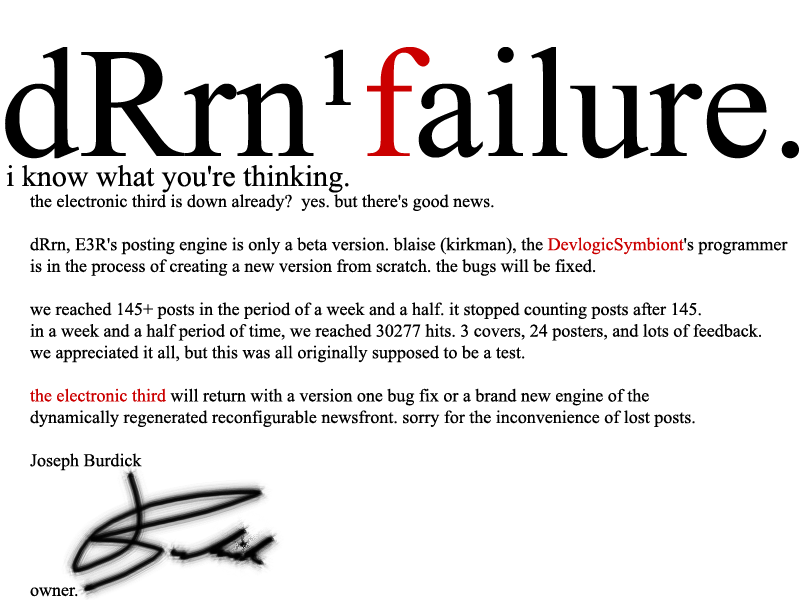
<style>
.page{position:relative;width:800px;height:600px;background:#ffffff}
.page>*{position:absolute;margin:0}
.t1{font:157px "TimesNewRomanPSMT";color:#000000}
.t2{font:157px "TimesNewRomanPSMT";color:#cb0000}
.t3{font:30px "TimesNewRomanPSMT";color:#000000}
.t4{font:18px "TimesNewRomanPSMT";color:#000000}
.t5{font:18px "TimesNewRomanPSMT";color:#cb0000}
</style>
<div class="page">
<p class="t1" style="left:5px;top:47px;width:794px;height:112px">dRrn¹<span class="t2">f</span>ailure.</p>
<p class="t3" style="left:6px;top:165px;width:343px;height:28px">i know what you're thinking.</p>
<p class="t4" style="left:30px;top:194px;width:758px;height:403px">the electronic third is down already?  yes. but there's good news.<br><br>dRrn, E3R's posting engine is only a beta version. blaise (kirkman), the <span class="t5">DevlogicSymbiont</span>'s programmer <br>is in the process of creating a new version from scratch. the bugs will be fixed.<br><br>we reached 145+ posts in the period of a week and a half. it stopped counting posts after 145.<br>in a week and a half period of time, we reached 30277 hits. 3 covers, 24 posters, and lots of feedback.<br>we appreciated it all, but this was all originally supposed to be a test.<br><br><span class="t5">the electronic third</span> will return with a version one bug fix or a brand new engine of the<br>dynamically regenerated reconfigurable newsfront. sorry for the inconvenience of lost posts.<br><br>Joseph Burdick<br><br><br><br><br><br>owner.</p>
</div>
